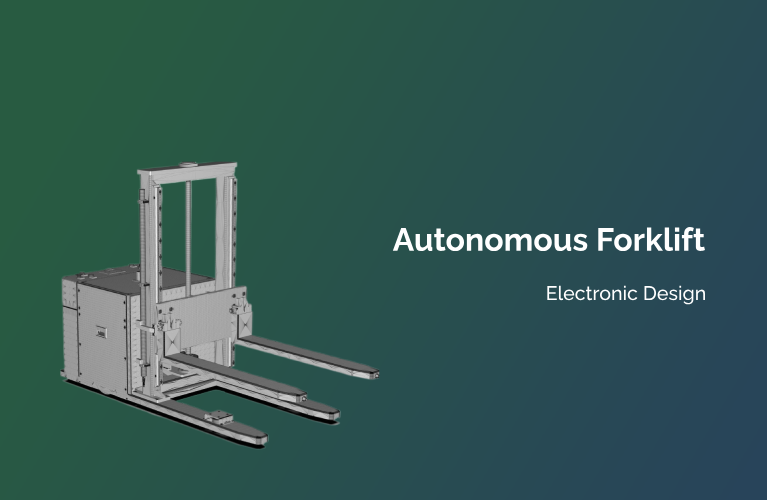
<style>
.page{position:relative;width:767px;height:500px}
.page>*{position:absolute;margin:0}
.t1{font:32px "Raleway-Bold";color:#ffffff}
.t2{font:19.6px "Raleway-Medium";color:#ffffff}
</style>
<div class="page">
<p class="t1" style="left:392px;top:227px;width:313px;height:24px">Autonomous Forklift</p>
<p class="t2" style="left:547px;top:285px;width:158px;height:20px">Electronic Design</p>
</div>
